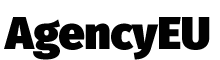
<style>
.page{position:relative;width:220px;height:60px;background:#ffffff}
.page>*{position:absolute;margin:0}
.t1{font:45.8px "FiraSans-Ultra";color:#010101}
</style>
<div class="page">
<p class="t1" style="left:4px;top:17px;width:206px;height:43px">AgencyEU</p>
</div>
